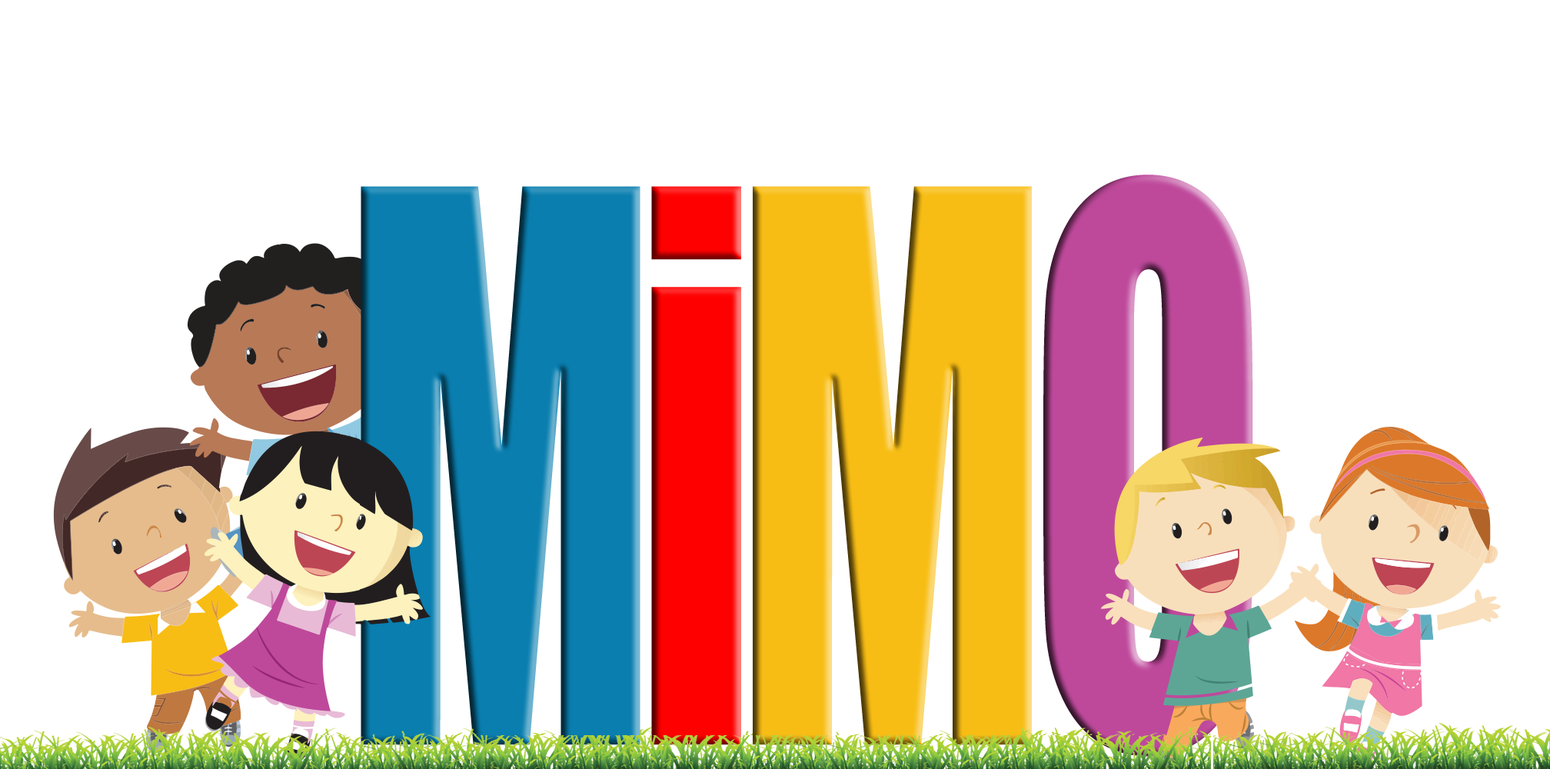
<style>
.page{position:relative;width:1550px;height:769px;background:#ffffff}
.page>*{position:absolute;margin:0}
.t1{font:705.9px "Impact";letter-spacing:-0.05em;color:#097eaf;scale:0.62 1}
.t2{font:705.9px "Impact";letter-spacing:-0.05em;color:#ff0000;scale:0.62 1}
.t3{font:705.9px "Impact";letter-spacing:-0.05em;color:#f8bd14;scale:0.62 1}
.t4{font:705.9px "Impact";letter-spacing:-0.05em;color:#be499b;scale:0.62 1}
</style>
<div class="page">
<p class="t1" style="left:361px;top:175px;width:893px;height:582px">M<span class="t2">i</span><span class="t3">M</span><span class="t4">O</span></p>
</div>
